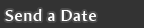
<style>
.page{position:relative;width:144px;height:28px;background:#333333}
.page>*{position:absolute;margin:0}
.t1{font:16px "AmiraParadiso";letter-spacing:0.05em;color:#ffffff}
</style>
<div class="page">
<p class="t1" style="left:5px;top:9px;width:91px;height:12px">Send a Date</p>
</div>
